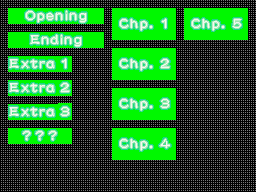
<style>
.page{position:relative;width:256px;height:192px;background:#000000}
.page>*{position:absolute;margin:0}
.t1{font:16.5px/24px "DFLeiShoStd-W5";letter-spacing:0.075em}
.t2{font:16.5px/40px "DFLeiShoStd-W5";letter-spacing:0.075em;color:#f8f8f0}
.t3{font:16.5px "DFLeiShoStd-W5";letter-spacing:0.075em;color:#f8f8f0}
.t4{font:16.5px/24px "DFLeiShoStd-W5";letter-spacing:0.075em;color:#f8f8f0}
.t5{font:16.5px/24px "DFLeiShoStd-W5";letter-spacing:0.2em;color:#f8f8f0}
</style>
<div class="page">
<p class="t1" style="left:24px;top:10px;width:64px;height:36px;text-align:center">Opening<br>Ending</p>
<p class="t2" style="left:119px;top:19px;width:51px;height:132px;text-align:center">Chp. 1<br>Chp. 2<br>Chp. 3<br>Chp. 4</p>
<p class="t3" style="left:191px;top:19px;width:50px;height:12px">Chp. 5</p>
<p class="t4" style="left:9px;top:59px;width:61px;height:81px;text-align:center">Extra 1<br>Extra 2<br>Extra 3<br><span class="t5">???</span></p>
</div>
